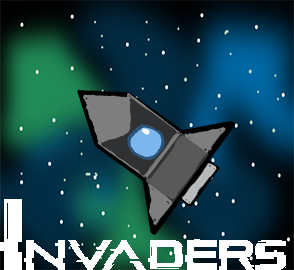
<style>
.page{position:relative;width:294px;height:270px}
.page>*{position:absolute;margin:0}
.t1{font:50px "GlitchInside";color:#ffffff}
.t2{font:100px "GlitchInside";color:#ffffff}
</style>
<div class="page">
<p class="t1" style="left:0px;top:199px;width:286px;height:71px"><span class="t2">I</span>nvaders</p>
</div>
